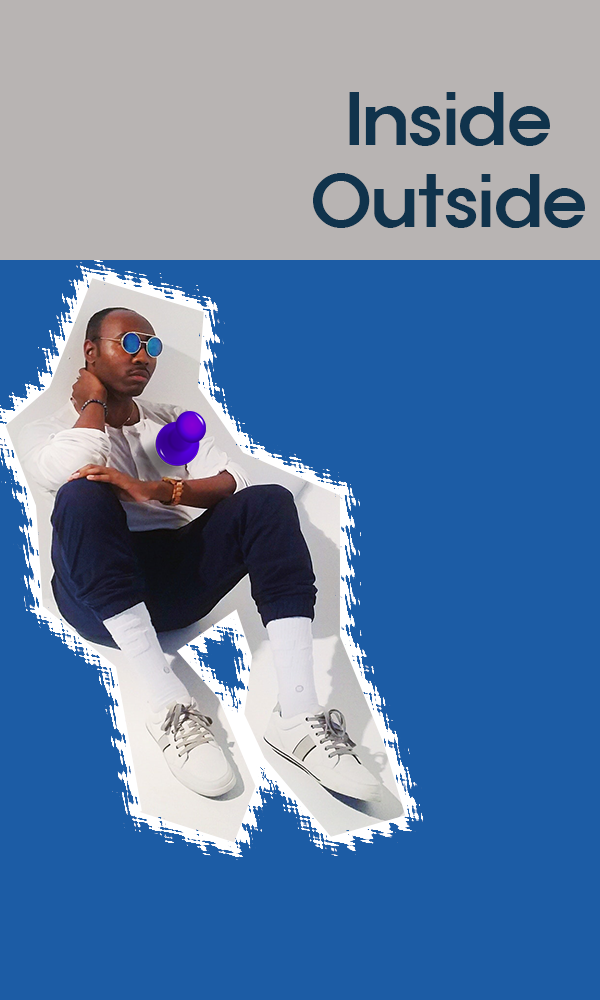
<style>
.page{position:relative;width:600px;height:1000px;background:#1c5ca5}
.page>*{position:absolute;margin:0}
.t1{font:67.8px "ExpoM-HM";color:#10334c}
</style>
<div class="page">
<p class="t1" style="left:313px;top:92px;width:272px;height:136px;text-align:center">Inside<br>Outside</p>
</div>
